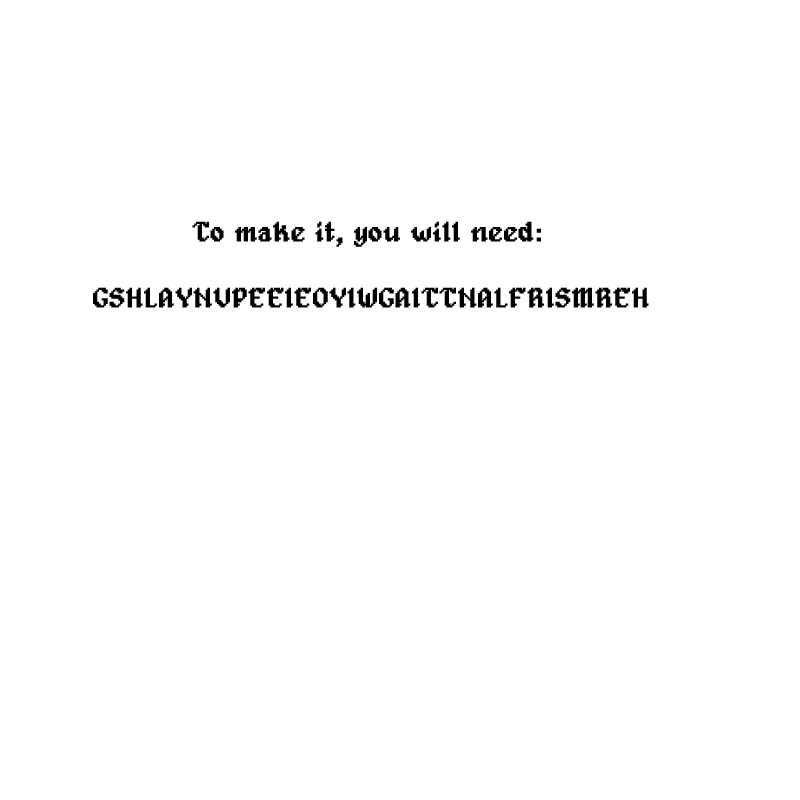
<style>
.page{position:relative;width:800px;height:800px;background:#ffffff}
.page>*{position:absolute;margin:0}
.t1{font:27.9px "Alagard";color:#000000;font-weight:bold}
</style>
<div class="page">
<p class="t1" style="left:93px;top:221px;width:556px;height:87px">To make it, you will need: <br><br> GSHLAYNVPEEIEOYIWGAITTNALFRISMREH</p>
</div>
